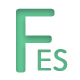
<style>
.page{position:relative;width:80px;height:80px;background:#ffffff}
.page>*{position:absolute;margin:0}
.t1{font:90px "STYuanti-TC-Regular";color:#66cc99;font-weight:bold}
.t2{font:30px "STYuanti-TC-Regular";color:#59b285;font-weight:bold}
</style>
<div class="page">
<p class="t1" style="left:16px;top:8px;width:39px;height:65px">F</p>
<p class="t2" style="left:37px;top:49px;width:31px;height:22px">ES</p>
</div>
